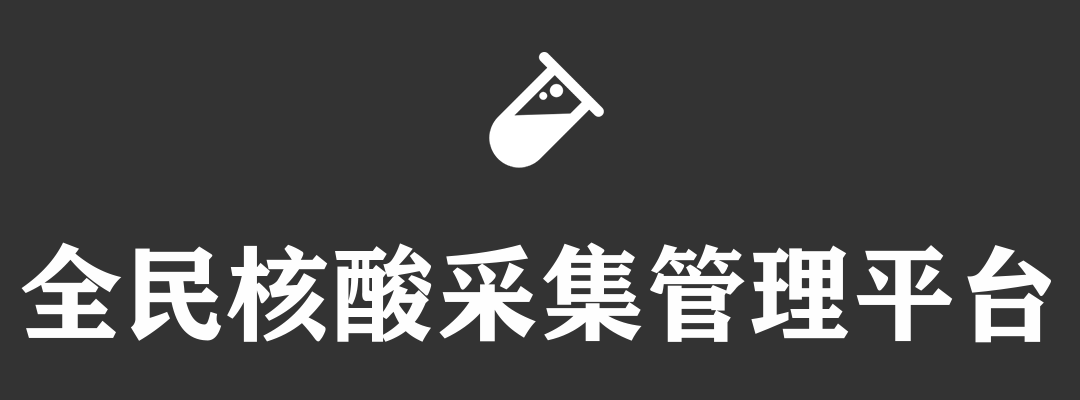
<style>
.page{position:relative;width:1080px;height:400px;background:#333333}
.page>*{position:absolute;margin:0}
.t1{font:104.2px "FZCHSJW--GB1-0";color:#fefefe}
</style>
<div class="page">
<p class="t1" style="left:21px;top:242px;width:1030px;height:101px">全民核酸采集管理平台</p>
</div>
